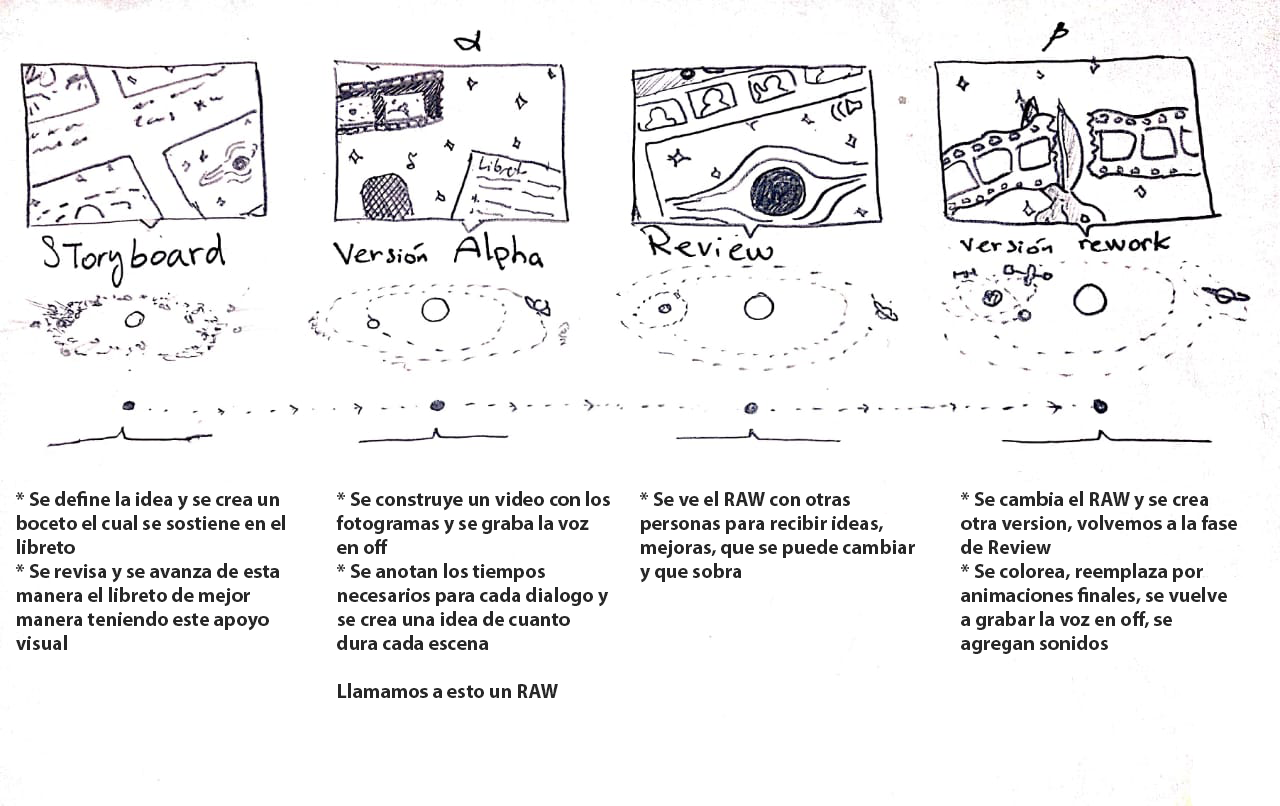
<style>
.page{position:relative;width:1280px;height:806px;background:#ffffff}
.page>*{position:absolute;margin:0}
.t1{font:20px "MyriadPro-Bold";color:#282828}
</style>
<div class="page">
<p class="t1" style="left:16px;top:491px;width:269px;height:159px">* Se define la idea y se crea un boceto el cual se sostiene en el libreto<br>* Se revisa y se avanza de esta manera el libreto de mejor manera teniendo este apoyo visual</p>
<p class="t1" style="left:336px;top:491px;width:274px;height:207px">* Se construye un video con los fotogramas y se graba la voz en off<br>* Se anotan los tiempos necesarios para cada dialogo y se crea una idea de cuanto dura cada escena<br><br>Llamamos a esto un RAW</p>
<p class="t1" style="left:640px;top:491px;width:275px;height:92px">* Se ve el RAW con otras personas para recibir ideas, mejoras, que se puede cambiar y que sobra</p>
<p class="t1" style="left:961px;top:491px;width:276px;height:163px">* Se cambia el RAW y se crea otra version, volvemos a la fase de Review<br>* Se colorea, reemplaza por animaciones finales, se vuelve a grabar la voz en off, se agregan sonidos</p>
</div>
